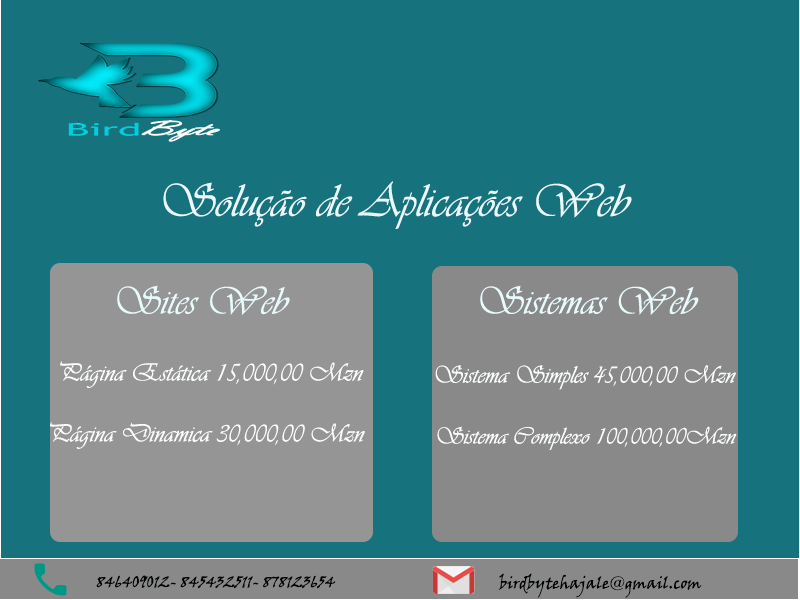
<style>
.page{position:relative;width:800px;height:600px;background:#16727d}
.page>*{position:absolute;margin:0}
.t1{font:48px "Vivaldii";color:#e8fafc}
.t2{font:40px "Vivaldii";color:#e8fafc}
.t3{font:26px "Vivaldii";color:#fcfefe}
.t4{font:25px "Vivaldii";color:#fcfefe}
.t5{font:24px "Vivaldii";color:#fcfefe}
.t6{font:16px "VinerHandITC";color:#000202}
</style>
<div class="page">
<p class="t1" style="left:163px;top:181px;width:469px;height:48px">Solução de Aplicações Web</p>
<p class="t2" style="left:117px;top:285px;width:173px;height:30px">Sites Web</p>
<p class="t2" style="left:480px;top:285px;width:219px;height:30px">Sistemas Web</p>
<p class="t3" style="left:60px;top:361px;width:304px;height:27px">Página Estática 15,000,00 Mzn</p>
<p class="t4" style="left:435px;top:365px;width:301px;height:25px">Sistema Simples 45,000,00 Mzn</p>
<p class="t3" style="left:50px;top:422px;width:315px;height:27px">Página Dinamica 30,000,00 Mzn</p>
<p class="t5" style="left:437px;top:426px;width:300px;height:25px">Sistema Complexo 100,000,00Mzn</p>
<p class="t6" style="left:96px;top:575px;width:240px;height:14px">846409012- 845432511- 878123654</p>
<p class="t6" style="left:498px;top:573px;width:204px;height:25px">birdbytehajale@gmail.com</p>
</div>
